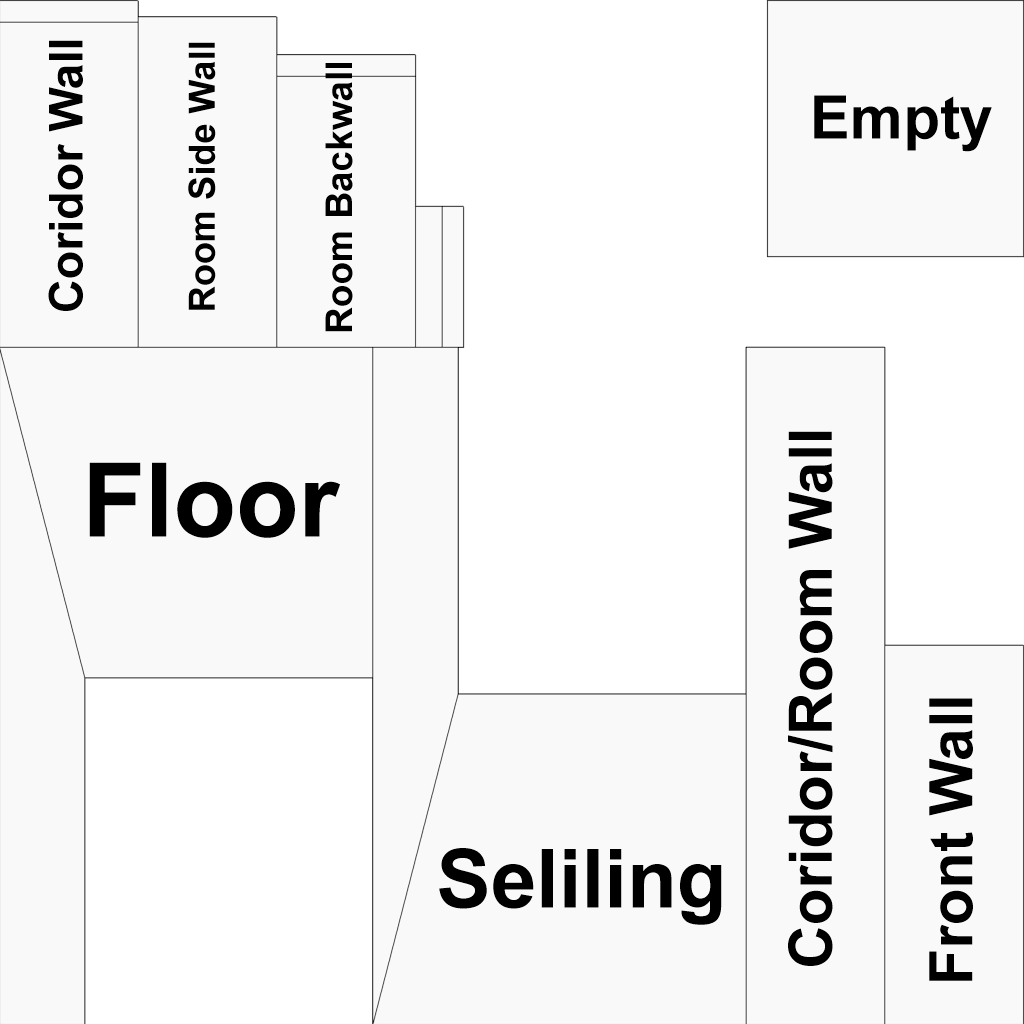
<style>
.page{position:relative;width:1024px;height:1024px;background:#f9f9f9}
.page>*{position:absolute;margin:0}
.t1{font:46.6px "Arial-BoldMT";color:#000000}
.t2{font:36.2px "Arial-BoldMT";color:#000000}
.t3{font:37px "Arial-BoldMT";color:#000000}
.t4{font:60px "Arial-BoldMT";color:#000000}
.t5{font:102.5px "Arial-BoldMT";color:#000000}
.t6{font:81.7px "Arial-BoldMT";color:#000000}
</style>
<div class="page">
<p class="t1" style="left:48px;top:40px;width:35px;height:271px;rotate:-90deg">Coridor Wall</p>
<p class="t2" style="left:188px;top:42px;width:28px;height:268px;rotate:-90deg">Room Side Wall</p>
<p class="t3" style="left:325px;top:63px;width:28px;height:269px;rotate:-90deg">Room Backwall</p>
<p class="t4" style="left:814px;top:95px;width:178px;height:57px">Empty</p>
<p class="t4" style="left:788px;top:431px;width:45px;height:535px;rotate:-90deg">Coridor/Room Wall</p>
<p class="t5" style="left:89px;top:462px;width:251px;height:76px">Floor</p>
<p class="t4" style="left:929px;top:698px;width:44px;height:283px;rotate:-90deg">Front Wall</p>
<p class="t6" style="left:439px;top:848px;width:283px;height:77px">Seliling</p>
</div>
